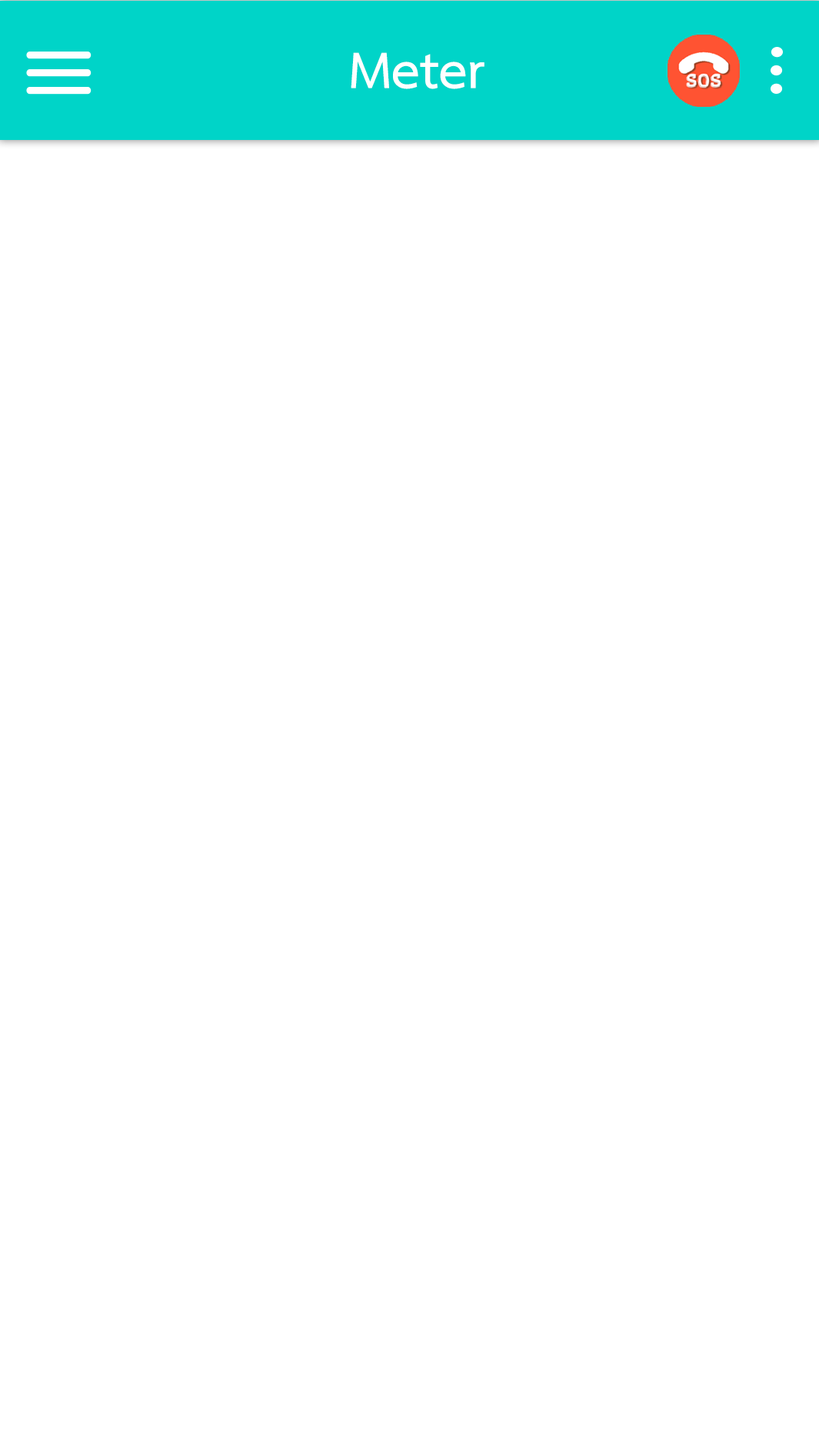
<style>
.page{position:relative;width:819px;height:1455px;background:#ffffff}
.page>*{position:absolute;margin:0}
.t1{font:73.4px "THSarabunPSK-Bold";color:#ffffff}
</style>
<div class="page">
<p class="t1" style="left:351px;top:52px;width:134px;height:37px">Meter</p>
</div>
